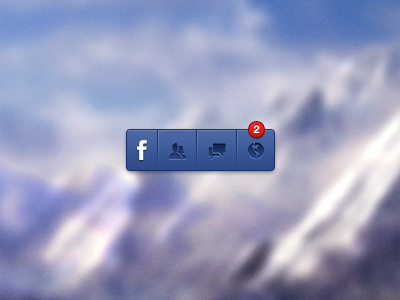
<style>
.page{position:relative;width:400px;height:300px}
.page>*{position:absolute;margin:0}
.t1{font:11px "HelveticaNeueLTCom-Bd";color:#ffffff}
</style>
<div class="page">
<p class="t1" style="left:253px;top:125px;width:7px;height:8px">2</p>
</div>
